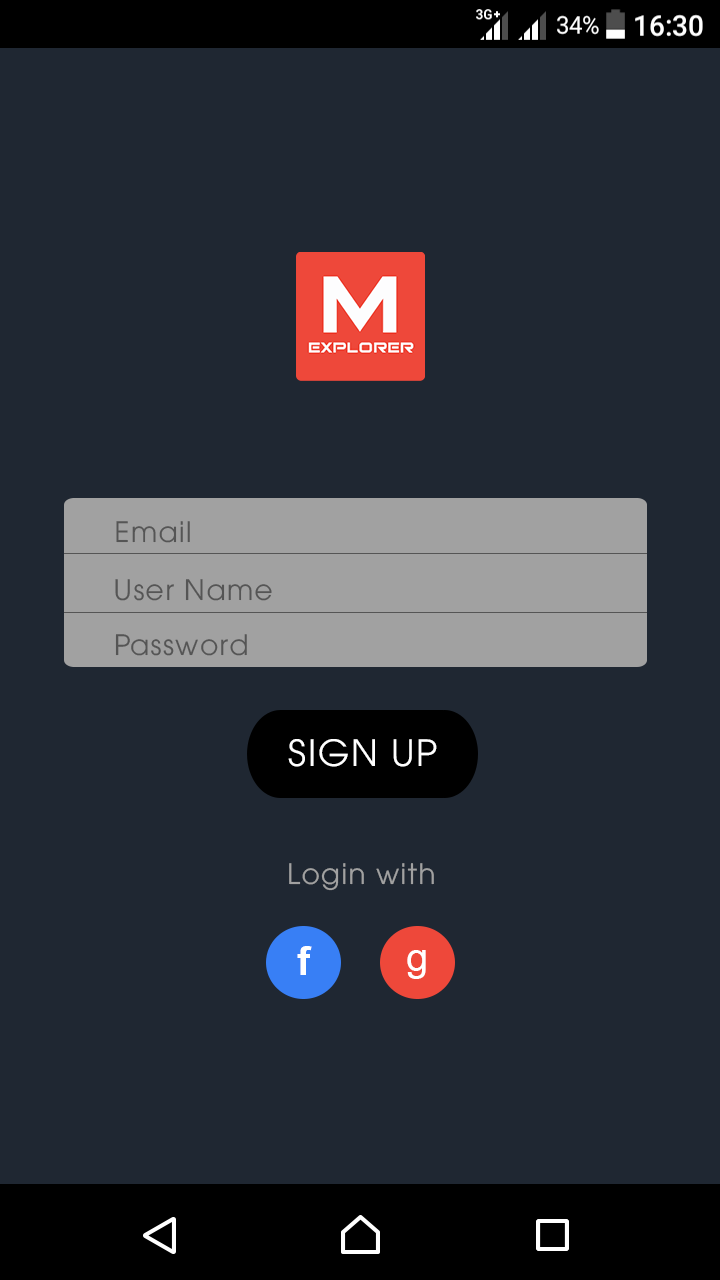
<style>
.page{position:relative;width:720px;height:1280px;background:#1f2732}
.page>*{position:absolute;margin:0}
.t1{font:28px "UTM-Avo";letter-spacing:0.05em;color:#555555}
.t2{font:36px "UTM-Avo";letter-spacing:0.05em;color:#ffffff}
.t3{font:28px "UTM-Avo";letter-spacing:0.05em;color:#a1a1a1}
.t4{font:40px "Arial-BoldMT";letter-spacing:0.05em;color:#ffffff}
.t5{font:40px "ArialMT";letter-spacing:0.05em;color:#ffffff}
</style>
<div class="page">
<p class="t1" style="left:116px;top:521px;width:74px;height:22px">Email</p>
<p class="t1" style="left:115px;top:579px;width:157px;height:22px">User Name</p>
<p class="t1" style="left:115px;top:634px;width:132px;height:22px">Password</p>
<p class="t2" style="left:288px;top:739px;width:149px;height:28px">SIGN UP</p>
<p class="t3" style="left:289px;top:863px;width:145px;height:28px">Login with</p>
<p class="t4" style="left:297px;top:946px;width:15px;height:29px">f</p>
<p class="t5" style="left:407px;top:950px;width:19px;height:29px">g</p>
</div>
